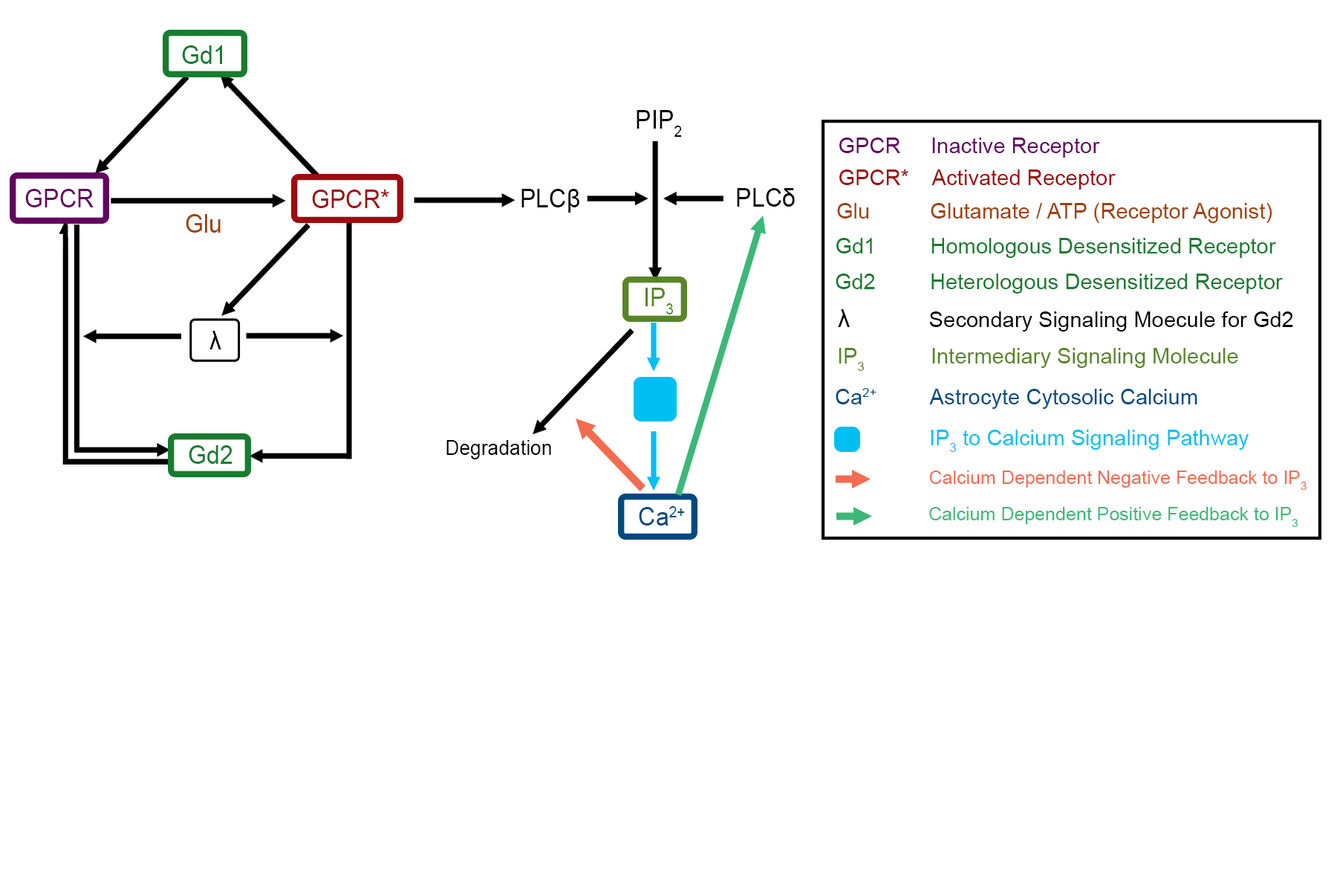
<style>
.page{position:relative;width:1337px;height:892px;background:#ffffff}
.page>*{position:absolute;margin:0}
.t1{font:25.1px "ArialMT";color:#197b30;scale:0.96 1}
.t2{font:25.1px "ArialMT";color:#000000;scale:0.96 1}
.t3{font:21.7px "ArialMT";color:#630460}
.t4{font:21.7px "ArialMT";color:#9e0b0f}
.t5{font:25.1px "ArialMT";color:#630460;scale:0.96 1}
.t6{font:25.1px "ArialMT";color:#9e0b0f;scale:0.96 1}
.t7{font:21.7px "ArialMT";color:#a0410d}
.t8{font:25.1px "ArialMT";color:#a0410d;scale:0.96 1}
.t9{font:21.7px "ArialMT";color:#197b30}
.t10{font:25.1px "ArialMT";color:#598527;scale:0.96 1}
.t11{font:21.7px "ArialMT";color:#000000}
.t12{font:24.8px "ArialMT";color:#000000}
.t13{font:21.7px "ArialMT";color:#598527}
.t14{font:21.7px "ArialMT";color:#004a80}
.t15{font:21.7px "ArialMT";color:#00bff3}
.t16{font:20.6px "ArialMT";color:#000000;scale:0.96 1}
.t17{font:18.6px "ArialMT";color:#f26c4f}
.t18{font:25.1px "ArialMT";color:#004a80;scale:0.96 1}
.t19{font:18.6px "ArialMT";color:#3cb878}
</style>
<div class="page">
<p class="t1" style="left:182px;top:45px;width:40px;height:19px">Gd1</p>
<p class="t2" style="left:637px;top:110px;width:45px;height:27px">PIP2</p>
<p class="t3" style="left:840px;top:137px;width:260px;height:21px">GPCR     Inactive Receptor</p>
<p class="t4" style="left:840px;top:169px;width:276px;height:20px">GPCR*    Activated Receptor</p>
<p class="t5" style="left:25px;top:189px;width:69px;height:18px">GPCR</p>
<p class="t6" style="left:312px;top:189px;width:77px;height:19px">GPCR*</p>
<p class="t2" style="left:522px;top:189px;width:58px;height:23px">PLCβ</p>
<p class="t2" style="left:737px;top:188px;width:58px;height:19px">PLCδ</p>
<p class="t7" style="left:837px;top:203px;width:436px;height:20px">Glu          Glutamate / ATP (Receptor Agonist)</p>
<p class="t8" style="left:186px;top:214px;width:35px;height:19px">Glu</p>
<p class="t9" style="left:837px;top:238px;width:439px;height:20px">Gd1         Homologous Desensitized Receptor</p>
<p class="t9" style="left:836px;top:273px;width:447px;height:20px">Gd2         Heterologous Desensitized Receptor</p>
<p class="t10" style="left:646px;top:288px;width:28px;height:26px">IP3</p>
<p class="t11" style="left:838px;top:309px;width:456px;height:22px"><span class="t12">λ            </span>Secondary Signaling Moecule for Gd2</p>
<p class="t2" style="left:210px;top:331px;width:11px;height:18px">λ</p>
<p class="t13" style="left:839px;top:348px;width:400px;height:23px">IP3           Intermediary Signaling Molecule</p>
<p class="t14" style="left:836px;top:388px;width:362px;height:21px">Ca2+         Astrocyte Cytosolic Calcium</p>
<p class="t15" style="left:931px;top:429px;width:319px;height:23px">IP3 to Calcium Signaling Pathway</p>
<p class="t1" style="left:189px;top:445px;width:44px;height:19px">Gd2</p>
<p class="t16" style="left:447px;top:440px;width:104px;height:19px">Degradation</p>
<p class="t17" style="left:929px;top:470px;width:378px;height:20px">Calcium Dependent Negative Feedback to IP3</p>
<p class="t18" style="left:639px;top:506px;width:46px;height:19px">Ca2+</p>
<p class="t19" style="left:929px;top:507px;width:369px;height:20px">Calcium Dependent Positive Feedback to IP3</p>
</div>
